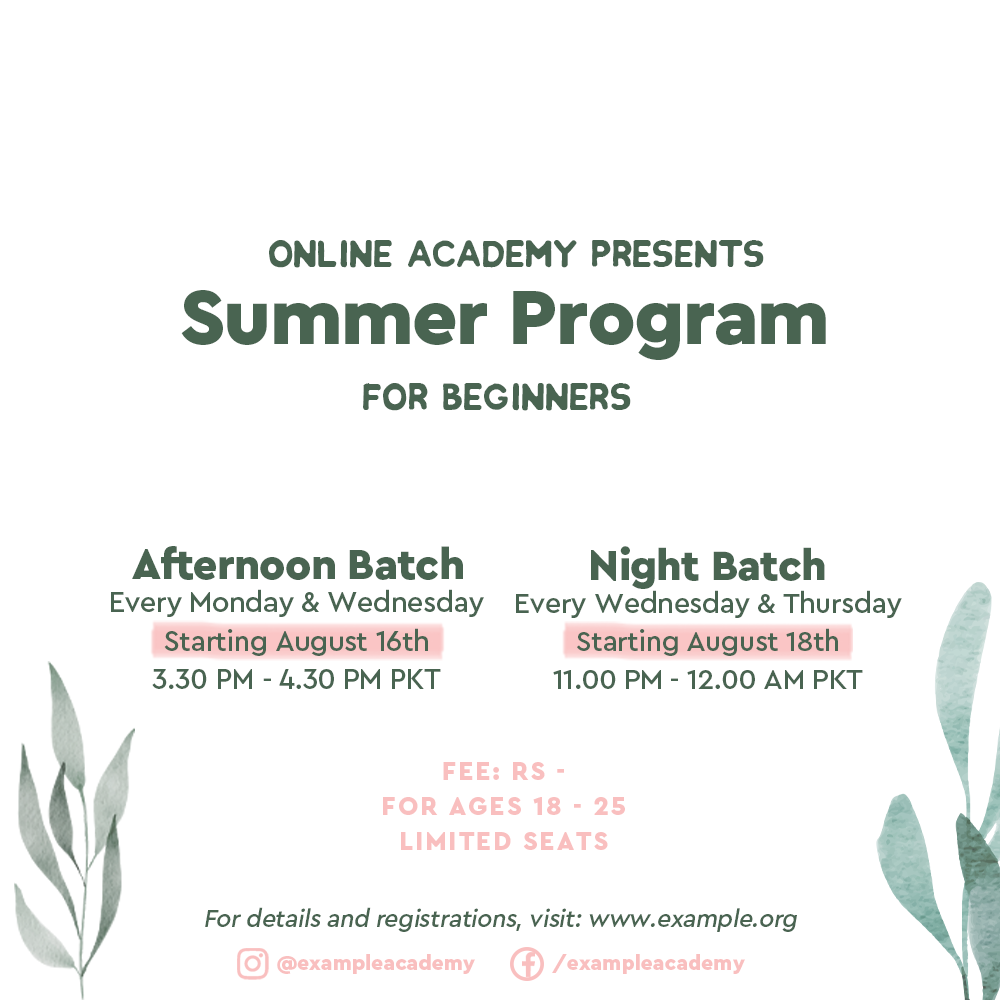
<style>
.page{position:relative;width:1000px;height:1000px;background:#ffffff}
.page>*{position:absolute;margin:0}
.t1{font:50.1px "ChlakhDemo";letter-spacing:-0.02em;color:#496451}
.t2{font:80.6px "CeraPro-Black";letter-spacing:-0.02em;color:#496451}
.t3{font:43.7px "CeraPro-Black";letter-spacing:-0.02em;color:#496451}
.t4{font:43.3px "CeraPro-Black";letter-spacing:-0.02em;color:#496451}
.t5{font:29.2px/38.6px "CeraPro-Medium";letter-spacing:-0.02em;color:#496451}
.t6{font:28.9px/38.3px "CeraPro-Medium";letter-spacing:-0.02em;color:#496451}
.t7{font:26.1px/34.8px "CeraPro-Black";letter-spacing:0.08em;color:#f9bfbf;text-transform:uppercase}
.t8{font:25px "CeraPro-Medium";letter-spacing:-0.02em;color:#496451;font-style:italic}
.t9{font:21.2px "CeraPro-Black";color:#f9bfbf}
</style>
<div class="page">
<p class="t1" style="left:269px;top:240px;width:495px;height:28px">Online Academy Presents</p>
<p class="t2" style="left:181px;top:290px;width:645px;height:70px">Summer Program</p>
<p class="t1" style="left:363px;top:383px;width:268px;height:28px">for beginners</p>
<p class="t3" style="left:132px;top:546px;width:331px;height:34px">Afternoon Batch</p>
<p class="t4" style="left:591px;top:546px;width:234px;height:43px">Night Batch</p>
<p class="t5" style="left:111px;top:589px;width:373px;height:100px;text-align:center">Every Monday &amp; Wednesday<br>Starting August 16th <br>3.30 PM - 4.30 PM PKT</p>
<p class="t6" style="left:516px;top:590px;width:386px;height:99px;text-align:center">Every Wednesday &amp; Thursday<br>Starting August 18th <br>11.00 PM - 12.00 AM PKT</p>
<p class="t7" style="left:383px;top:762px;width:242px;height:88px;text-align:center">Fee: Rs -<br>for ages 18 - 25<br>Limited seats</p>
<p class="t8" style="left:205px;top:907px;width:592px;height:25px">For details and registrations, visit: www.example.org</p>
<p class="t9" style="left:277px;top:954px;width:198px;height:20px">@exampleacademy</p>
<p class="t9" style="left:552px;top:954px;width:193px;height:20px">/exampleacademy</p>
</div>
